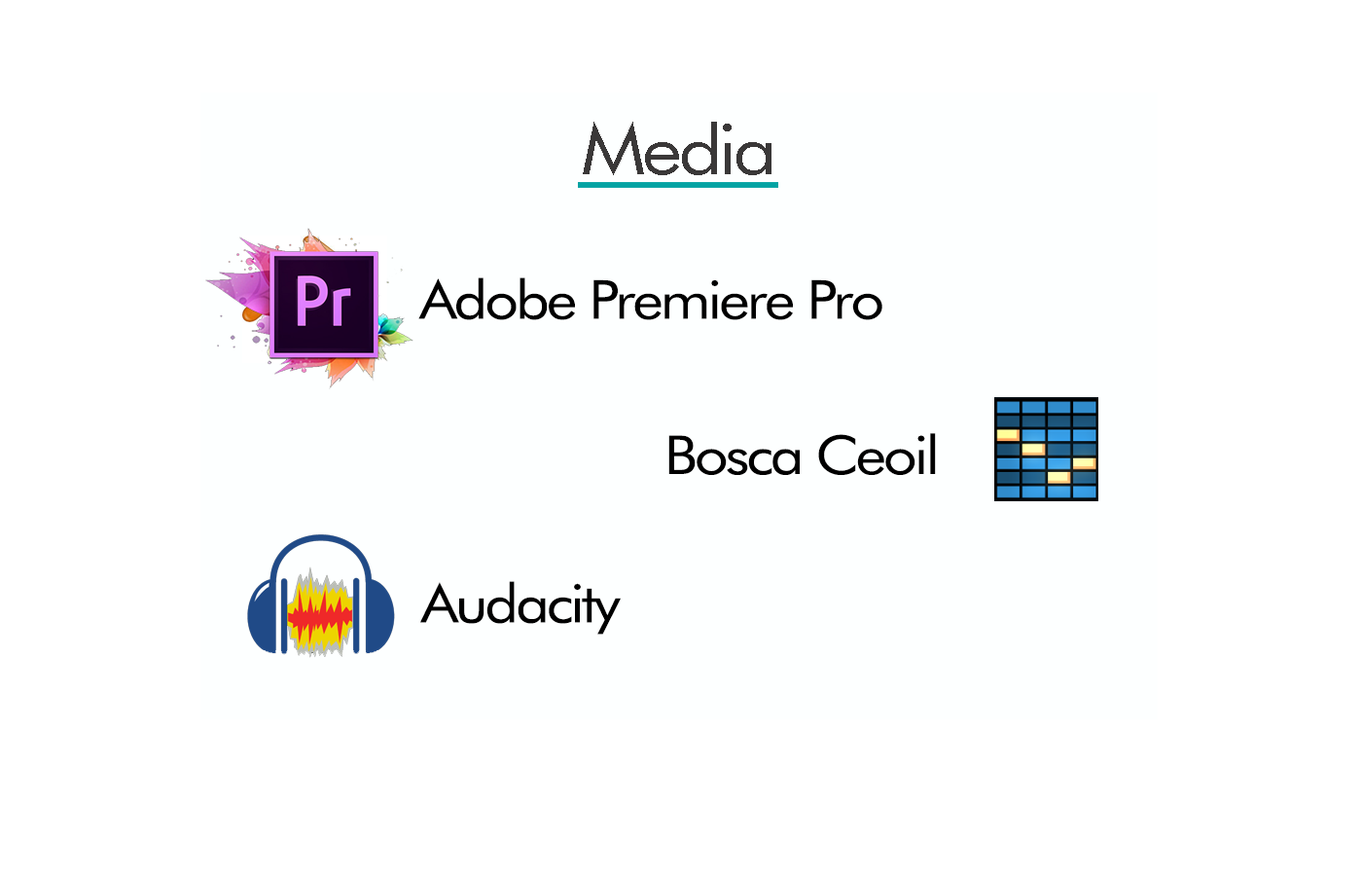
<style>
.page{position:relative;width:1362px;height:876px;background:#ffffff}
.page>*{position:absolute;margin:0}
.t1{font:70px "FuturaBT-Book";letter-spacing:-0.05em;color:#3a3838;scale:1.11 1}
.t2{font:53.5px "FuturaBT-Book";letter-spacing:-0.05em;color:#000000;scale:1.11 1}
</style>
<div class="page">
<p class="t1" style="left:583px;top:122px;width:188px;height:53px">Media</p>
<p class="t2" style="left:418px;top:277px;width:464px;height:43px">Adobe Premiere Pro</p>
<p class="t2" style="left:668px;top:433px;width:268px;height:42px">Bosca Ceoil</p>
<p class="t2" style="left:420px;top:581px;width:201px;height:53px">Audacity</p>
</div>
